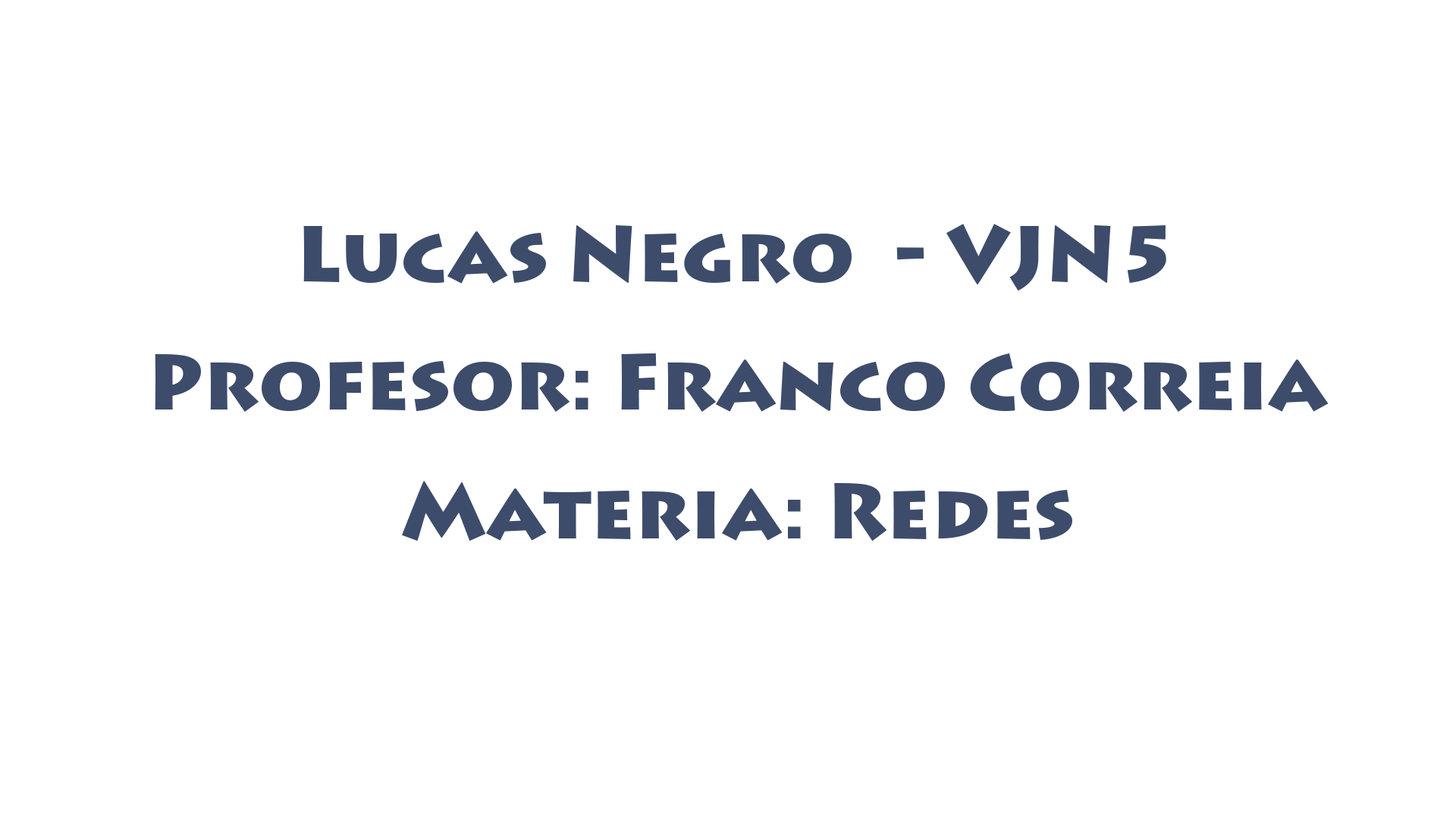
<style>
.page{position:relative;width:1456px;height:819px;background:#ffffff}
.page>*{position:absolute;margin:0}
.t1{font:78.3px/128.3px "LithosPro-Black";color:#3d4c6b}
</style>
<div class="page">
<p class="t1" style="left:155px;top:224px;width:1174px;height:317px;text-align:center">Lucas Negro  - VJN5<br>Profesor: Franco Correia<br>Materia: Redes</p>
</div>
